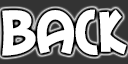
<style>
.page{position:relative;width:128px;height:64px;background:#ffffff}
.page>*{position:absolute;margin:0}
.t1{font:60px "MailRayStuff";color:#ffffff}
</style>
<div class="page">
<p class="t1" style="left:2px;top:9px;width:125px;height:47px">BACK</p>
</div>
